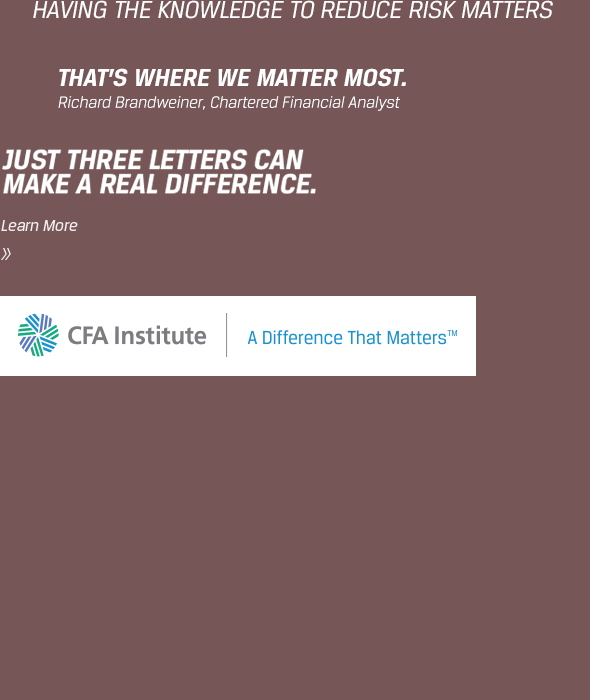
<style>
.page{position:relative;width:590px;height:700px;background:#765656}
.page>*{position:absolute;margin:0}
.t1{font:26px "CFABreuerText-RegularItalic";color:#ffffff;text-transform:uppercase}
.t2{font:26px "CFABreuerText-BoldItalic";color:#ffffff;text-transform:uppercase}
.t3{font:17px "CFABreuerText-LightItalic";color:#ffffff}
.t4{font:29.8px/24.2px "CFABreuerText-BoldItalic";color:#ffffff;text-transform:uppercase}
</style>
<div class="page">
<p class="t1" style="left:33px;top:0px;width:520px;height:19px">Having the knowledge to reduce risk matters</p>
<p class="t2" style="left:59px;top:68px;width:347px;height:19px">That’s where we matter most.</p>
<p class="t3" style="left:58px;top:96px;width:342px;height:15px">Richard Brandweiner, Chartered Financial Analyst</p>
<p class="t4" style="left:2px;top:149px;width:314px;height:45px">JUST THREE LETTERS CAN <br>MAKE A REAL DIFFERENCE.</p>
</div>
